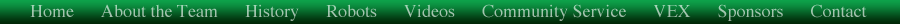
<style>
.page{position:relative;width:900px;height:24px}
.page>*{position:absolute;margin:0}
.t1{font:18px "Times-Roman";color:#a3c5af}
</style>
<div class="page">
<p class="t1" style="left:30px;top:4px;width:837px;height:17px">Home      About the Team      History      Robots      Videos      Community Service      VEX      Sponsors      Contact</p>
</div>
